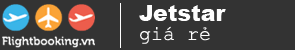
<style>
.page{position:relative;width:295px;height:50px;background:#333333}
.page>*{position:absolute;margin:0}
.t1{font:22px "Arial-Black";color:#fdfdfd}
.t2{font:20px "CourierNewPSMT";color:#fdfdfd}
.t3{font:22px "CourierNewPSMT";color:#fdfdfd}
</style>
<div class="page">
<p class="t1" style="left:139px;top:5px;width:87px;height:16px">Jetstar</p>
<p class="t2" style="left:140px;top:26px;width:70px;height:18px"><span class="t3"><br></span>giá rẻ</p>
</div>
